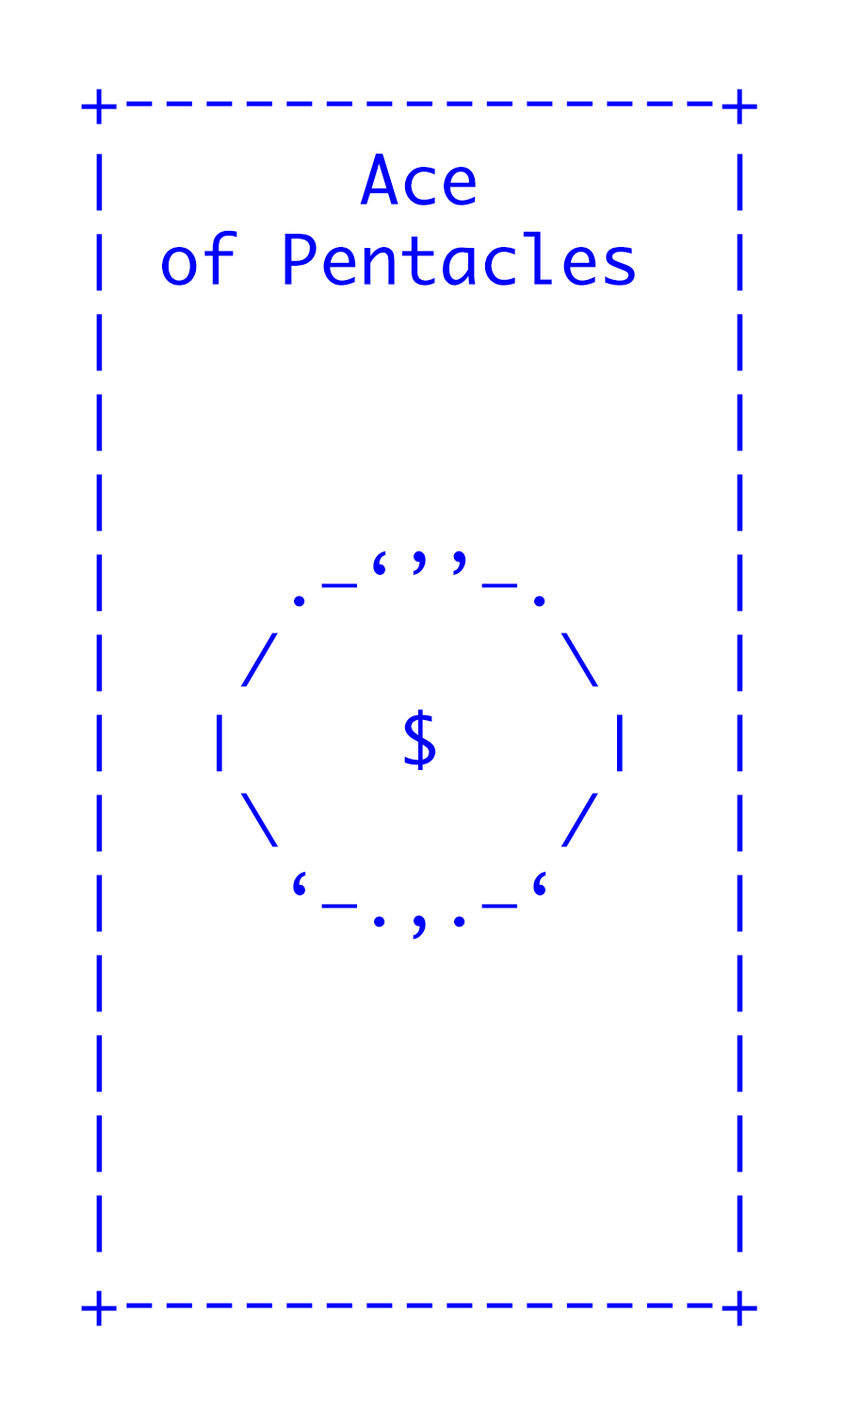
<style>
.page{position:relative;width:845px;height:1411px;background:#ffffff}
.page>*{position:absolute;margin:0}
.t1{font:66.7px "Monaco";color:#0000ff}
</style>
<div class="page">
<p class="t1" style="left:81px;top:89px;width:677px;height:1237px">+---------------+<br>│      Ace      │<br>│ of Pentacles  │<br>│               │<br>│               │<br>│               │<br>│    .—‘’’—.    │<br>│   /       \   │<br>│  │    $    │  │<br>│   \       /   │<br>│    ‘—.,.—‘    │ <br>│               │ <br>│               │<br>│               │<br>│               │<br>+---------------+</p>
</div>
